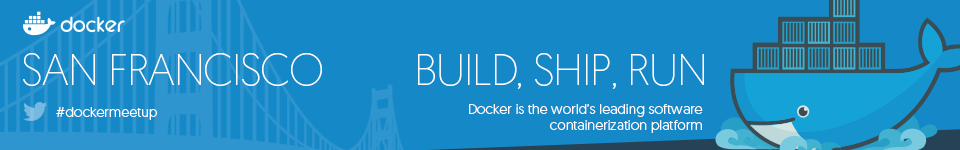
<style>
.page{position:relative;width:960px;height:150px;background:#1588c8}
.page>*{position:absolute;margin:0}
.t1{font:44px "Geomanist-ExtraLight";letter-spacing:-0.025em;color:#ffffff;text-transform:uppercase}
.t2{font:44px "Geomanist-ExtraLight";letter-spacing:-0.025em;color:#ffffff}
.t3{font:14px "Geomanist-Light";letter-spacing:0.005em;color:#ffffff}
.t4{font:14px/16px "Geomanist-Light";letter-spacing:0.005em;color:#ffffff}
</style>
<div class="page">
<p class="t1" style="left:23px;top:53px;width:299px;height:33px">San Francisco</p>
<p class="t2" style="left:418px;top:53px;width:286px;height:36px">BUILD, SHIP, RUN</p>
<p class="t3" style="left:56px;top:107px;width:101px;height:13px">#dockermeetup</p>
<p class="t4" style="left:469px;top:104px;width:234px;height:29px;text-align:right">Docker is the world’s leading software<br>containerization platform</p>
</div>
